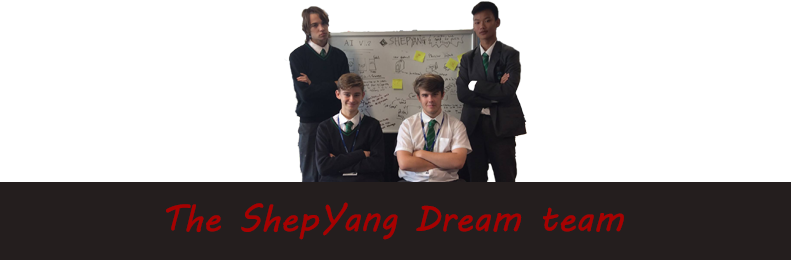
<style>
.page{position:relative;width:791px;height:260px;background:#ffffff}
.page>*{position:absolute;margin:0}
.t1{font:36px "MVBoli";color:#a70101}
</style>
<div class="page">
<p class="t1" style="left:166px;top:202px;width:458px;height:38px">The ShepYang Dream team</p>
</div>
